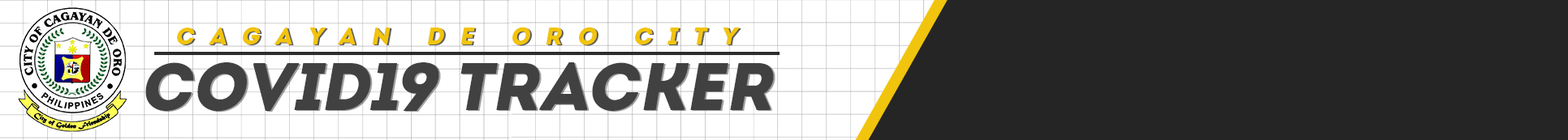
<style>
.page{position:relative;width:1568px;height:140px;background:#252525}
.page>*{position:absolute;margin:0}
.t1{font:24.4px "Intro";letter-spacing:0.61em;color:#f1c40d;font-style:italic}
.t2{font:67.4px "Intro";letter-spacing:-0.01em;color:#414141;font-style:italic}
</style>
<div class="page">
<p class="t1" style="left:177px;top:27px;width:563px;height:18px">CAGAYAN DE ORO CITY</p>
<p class="t2" style="left:145px;top:63px;width:629px;height:49px">COVID19 TRACKER</p>
</div>
